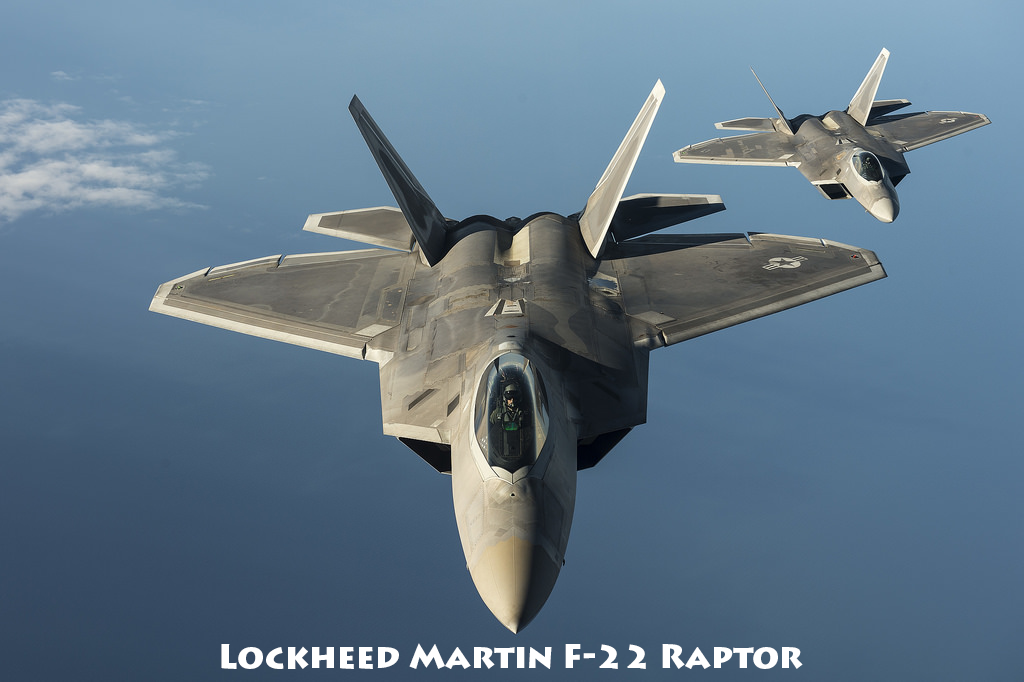
<style>
.page{position:relative;width:1024px;height:682px}
.page>*{position:absolute;margin:0}
.t1{font:33.3px "LithosPro-Black";color:#ffffff}
</style>
<div class="page">
<p class="t1" style="left:221px;top:643px;width:582px;height:26px">Lockheed Martin F-22 Raptor</p>
</div>
